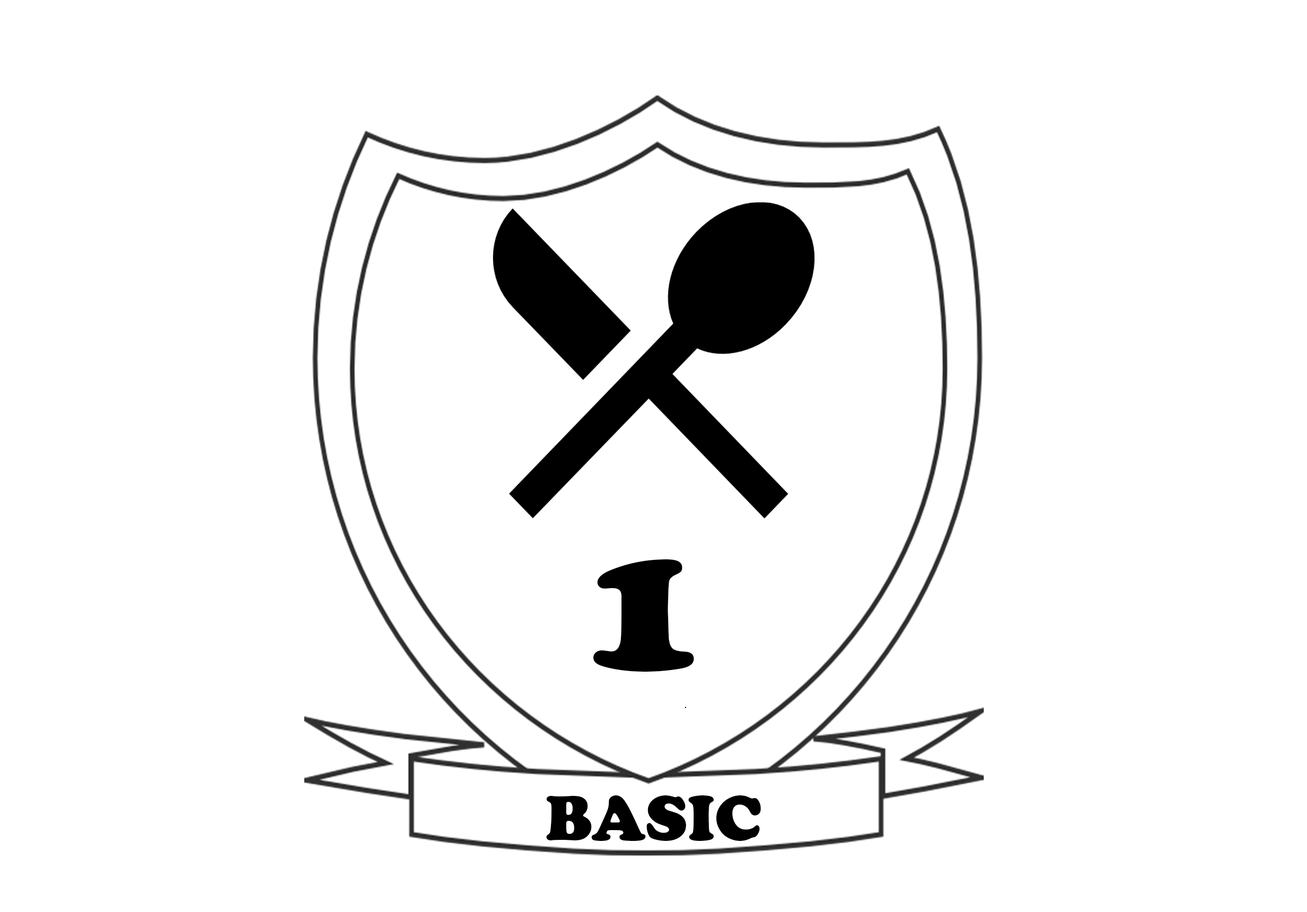
<style>
.page{position:relative;width:1307px;height:912px;background:#ffffff}
.page>*{position:absolute;margin:0}
.t1{font:195.3px "CooperBlack";color:#000000}
.t2{font:65.1px "CooperBlack";color:#000000}
</style>
<div class="page">
<p class="t1" style="left:594px;top:559px;width:100px;height:113px">1</p>
<p class="t2" style="left:546px;top:795px;width:215px;height:46px">BASIC</p>
</div>
